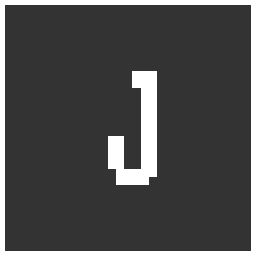
<style>
.page{position:relative;width:256px;height:256px;background:#333333}
.page>*{position:absolute;margin:0}
.t1{font:130px "November";color:#ffffff}
</style>
<div class="page">
<p class="t1" style="left:108px;top:71px;width:49px;height:114px">J</p>
</div>
